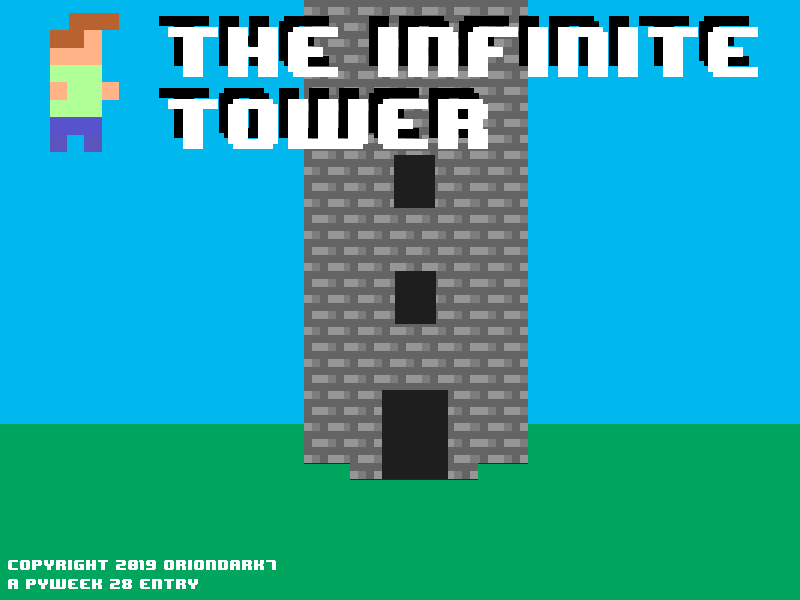
<style>
.page{position:relative;width:800px;height:600px;background:#00b8ee}
.page>*{position:absolute;margin:0}
.t1{font:60px "8BITWONDERNominal"}
.t2{font:60px "8BITWONDERNominal";color:#ffffff}
.t3{font:12px "8BITWONDERNominal";color:#ffffff}
</style>
<div class="page">
<p class="t1" style="left:159px;top:16px;width:590px;height:122px">THE INFINITE<br>TOWER</p>
<p class="t2" style="left:168px;top:27px;width:590px;height:122px">THE INFINITE<br>TOWER</p>
<p class="t3" style="left:8px;top:560px;width:268px;height:10px">copyright 2019 oriondark7</p>
<p class="t3" style="left:8px;top:579px;width:190px;height:10px">a pyweek 28 entry</p>
</div>
